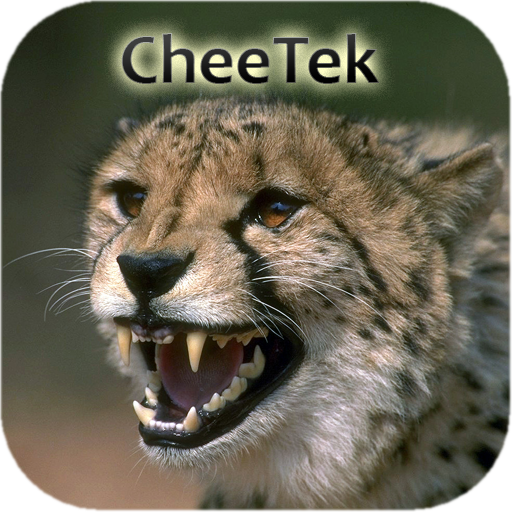
<style>
.page{position:relative;width:512px;height:512px}
.page>*{position:absolute;margin:0}
.t1{font:72px "Candara-Bold"}
</style>
<div class="page">
<p class="t1" style="left:121px;top:33px;width:259px;height:51px">CheeTek</p>
</div>
